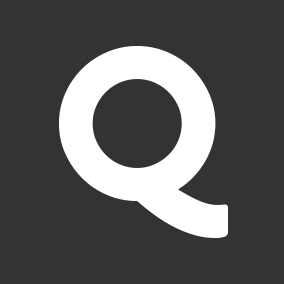
<style>
.page{position:relative;width:284px;height:284px;background:#333333}
.page>*{position:absolute;margin:0}
.t1{font:200px "Paralex-Regular2";color:#ffffff}
</style>
<div class="page">
<p class="t1" style="left:58px;top:46px;width:170px;height:192px">Q</p>
</div>
